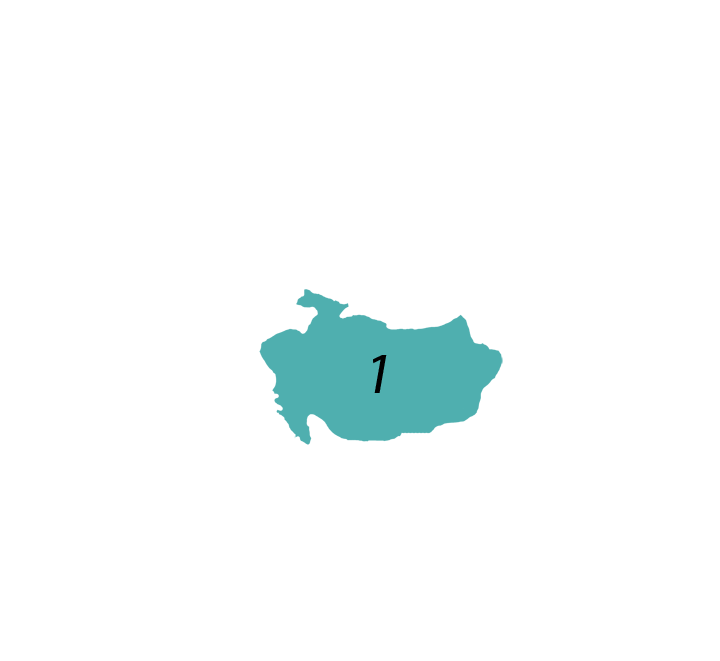
<style>
.page{position:relative;width:720px;height:661px;background:#ffffff}
.page>*{position:absolute;margin:0}
.t1{font:57.9px "MyriadPro-Regular";color:#000000;text-transform:uppercase;font-style:italic}
</style>
<div class="page">
<p class="t1" style="left:373px;top:355px;width:14px;height:38px">1</p>
</div>
